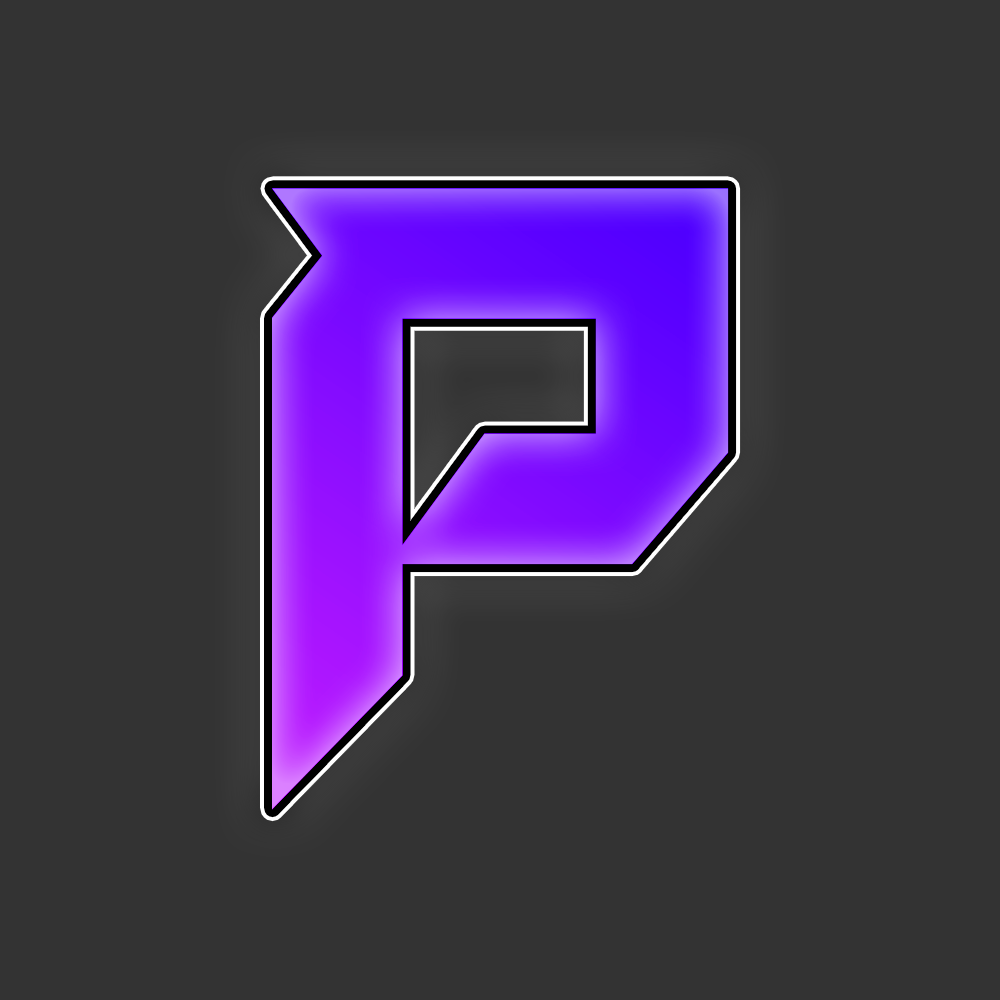
<style>
.page{position:relative;width:1000px;height:1000px;background:#333333}
.page>*{position:absolute;margin:0}
.t1{font:863.6px "Andromeda"}
</style>
<div class="page">
<p class="t1" style="left:272px;top:188px;width:457px;height:622px">P</p>
</div>
